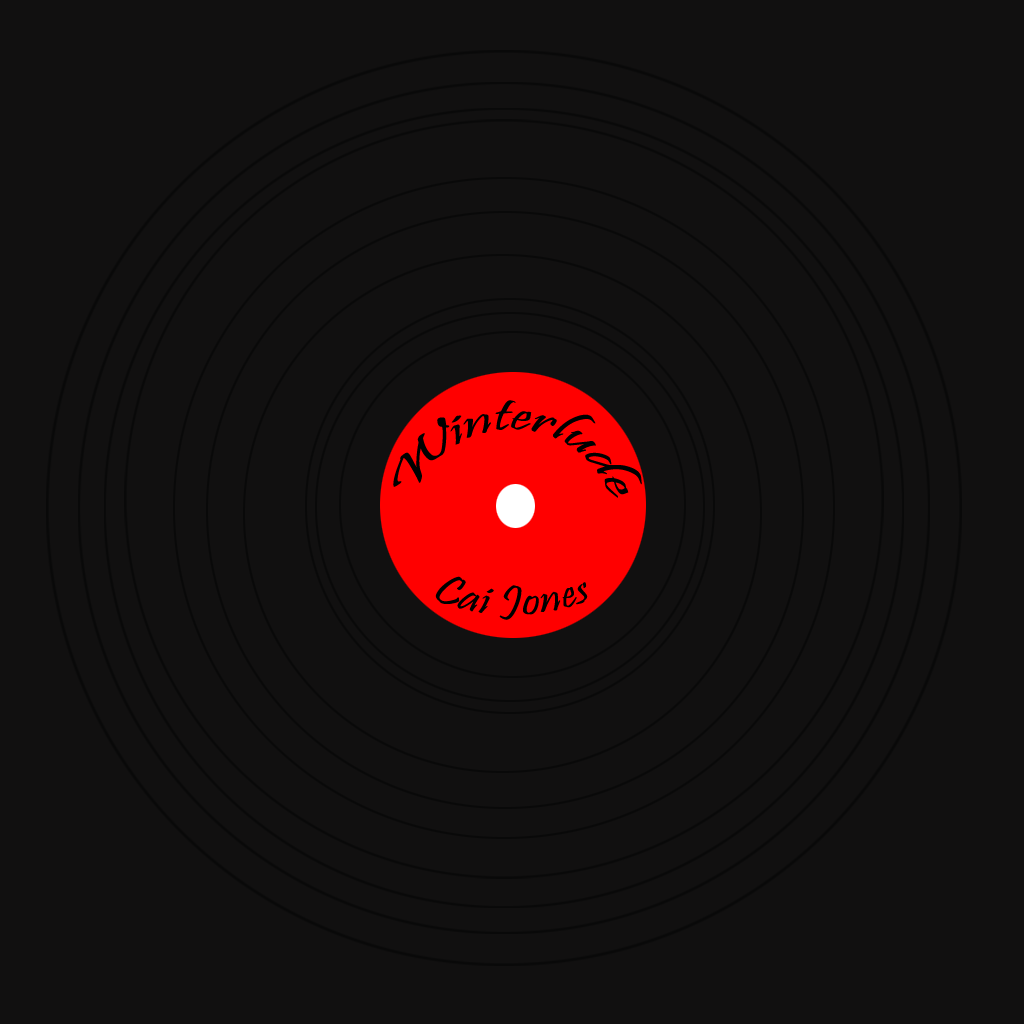
<style>
.page{position:relative;width:1024px;height:1024px;background:#111010}
.page>*{position:absolute;margin:0}
.t1{font:43.8px "Pristina-Regular";color:#000000}
</style>
<div class="page">
<p class="t1" style="left:393px;top:400px;width:249px;height:98px">Winterlude</p>
<p class="t1" style="left:435px;top:576px;width:153px;height:44px">Cai Jones</p>
</div>
